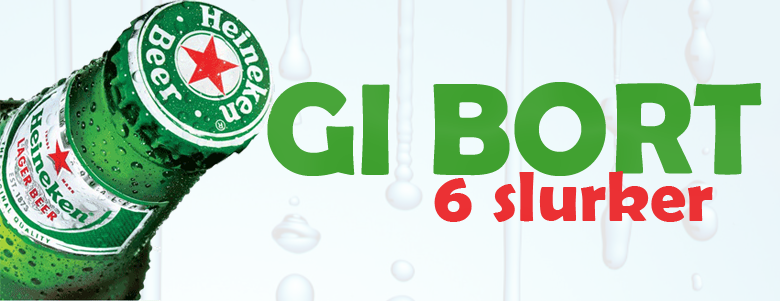
<style>
.page{position:relative;width:780px;height:301px}
.page>*{position:absolute;margin:0}
.t1{font:130.6px "BerlinSansFBDemi-Bold";color:#3d9f2d}
.t2{font:72.3px "BerlinSansFBDemi-Bold";color:#ea2427}
</style>
<div class="page">
<p class="t1" style="left:267px;top:82px;width:495px;height:94px">GI BORT</p>
<p class="t2" style="left:434px;top:171px;width:279px;height:51px">6 slurker</p>
</div>
